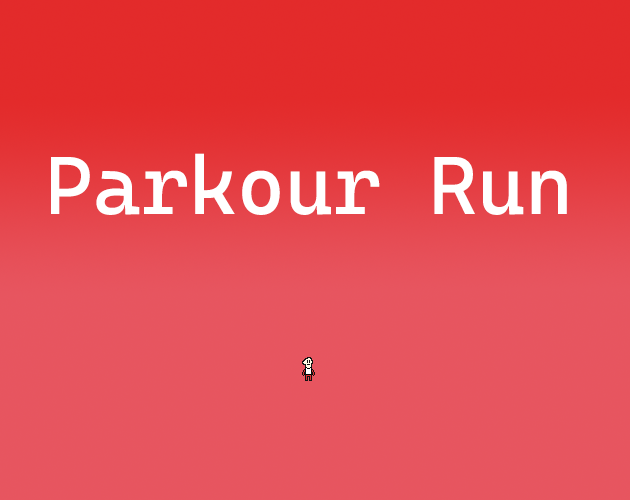
<style>
.page{position:relative;width:630px;height:500px}
.page>*{position:absolute;margin:0}
.t1{font:82px "CascadiaMono-Roman";color:#ffffff}
</style>
<div class="page">
<p class="t1" style="left:51px;top:153px;width:516px;height:62px">Parkour Run</p>
</div>
